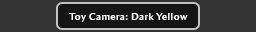
<style>
.page{position:relative;width:256px;height:32px;background:#333333}
.page>*{position:absolute;margin:0}
.t1{font:10px "AmiraParadiso";letter-spacing:0.05em;color:#ffffff}
</style>
<div class="page">
<p class="t1" style="left:69px;top:13px;width:119px;height:9px">Toy Camera: Dark Yellow</p>
</div>
